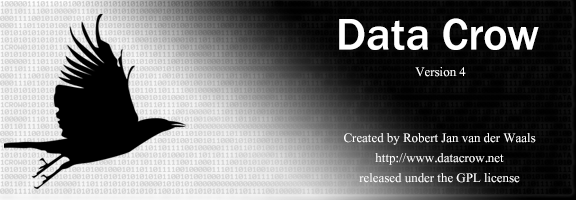
<style>
.page{position:relative;width:576px;height:200px}
.page>*{position:absolute;margin:0}
.t1{font:45.8px "FranklinGothic-Medium";color:#ffffff}
.t2{font:16.7px "Kokila";color:#ffffff}
</style>
<div class="page">
<p class="t1" style="left:339px;top:18px;width:200px;height:32px">Data Crow</p>
<p class="t2" style="left:415px;top:67px;width:51px;height:10px">Version 4</p>
<p class="t2" style="left:344px;top:133px;width:192px;height:50px;text-align:center">Created by Robert Jan van der Waals<br>http://www.datacrow.net<br>released under the GPL license</p>
</div>
